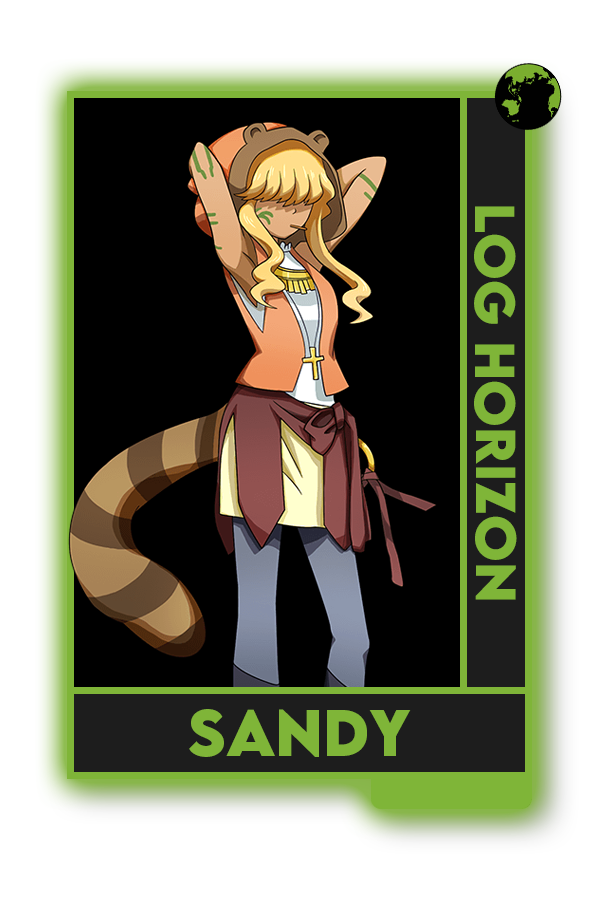
<style>
.page{position:relative;width:600px;height:900px;background:#000000}
.page>*{position:absolute;margin:0}
.t1{font:50px "LEMONMILK-Bold";color:#7fad41}
.t2{font:58.3px "LEMONMILK-Bold";color:#7fad41}
</style>
<div class="page">
<p class="t1" style="left:474px;top:206px;width:43px;height:394px;rotate:90deg">Log Horizon</p>
<p class="t2" style="left:189px;top:709px;width:222px;height:48px">Sandy</p>
</div>
